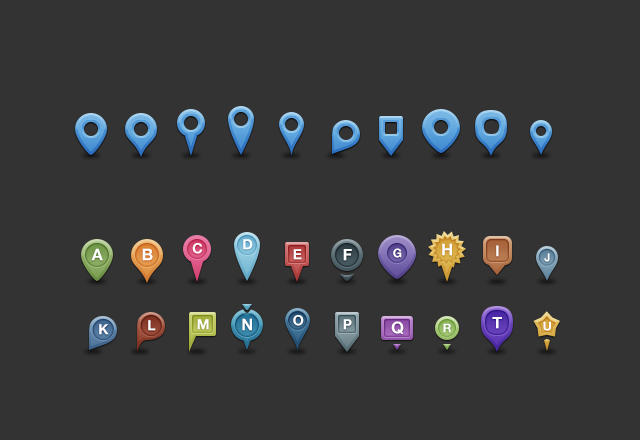
<style>
.page{position:relative;width:640px;height:440px;background:#333333}
.page>*{position:absolute;margin:0}
.t1{font:14px "HelveticaNeue-Bold";color:#ffffff}
.t2{font:16px "HelveticaNeue-Bold";color:#ffffff}
.t3{font:15px "HelveticaNeue-Bold";color:#ffffff}
.t4{font:12px "HelveticaNeue-Bold";color:#ffffff}
.t5{font:11px "HelveticaNeue-Bold";color:#ffffff}
</style>
<div class="page">
<p class="t1" style="left:192px;top:243px;width:10px;height:11px">C</p>
<p class="t1" style="left:243px;top:239px;width:10px;height:11px">D</p>
<p class="t2" style="left:442px;top:243px;width:10px;height:13px">H</p>
<p class="t3" style="left:496px;top:245px;width:3px;height:12px">I</p>
<p class="t2" style="left:91px;top:248px;width:12px;height:13px">A</p>
<p class="t2" style="left:142px;top:248px;width:11px;height:13px">B</p>
<p class="t1" style="left:293px;top:249px;width:9px;height:11px">E</p>
<p class="t2" style="left:343px;top:249px;width:9px;height:12px">F</p>
<p class="t4" style="left:393px;top:248px;width:9px;height:10px">G</p>
<p class="t5" style="left:544px;top:253px;width:6px;height:9px">J</p>
<p class="t2" style="left:242px;top:318px;width:10px;height:13px">N</p>
<p class="t1" style="left:293px;top:315px;width:11px;height:11px">O</p>
<p class="t2" style="left:492px;top:317px;width:10px;height:12px">T</p>
<p class="t1" style="left:99px;top:324px;width:10px;height:11px">K</p>
<p class="t1" style="left:148px;top:320px;width:8px;height:11px">L</p>
<p class="t1" style="left:197px;top:319px;width:12px;height:11px">M</p>
<p class="t1" style="left:343px;top:319px;width:9px;height:11px">P</p>
<p class="t2" style="left:391px;top:321px;width:13px;height:14px">Q</p>
<p class="t4" style="left:443px;top:323px;width:8px;height:10px">R</p>
<p class="t4" style="left:543px;top:321px;width:8px;height:10px">U</p>
</div>
